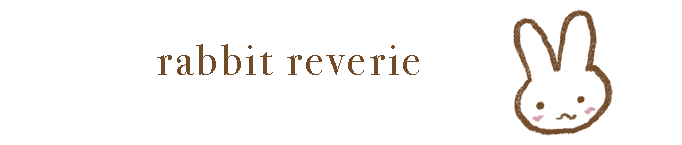
<style>
.page{position:relative;width:682px;height:145px;background:#ffffff}
.page>*{position:absolute;margin:0}
.t1{font:44px "BodoniSvtyTwoITCTT-Book";letter-spacing:0.075em;color:#724b29}
</style>
<div class="page">
<p class="t1" style="left:157px;top:44px;width:262px;height:31px">rabbit reverie</p>
</div>
